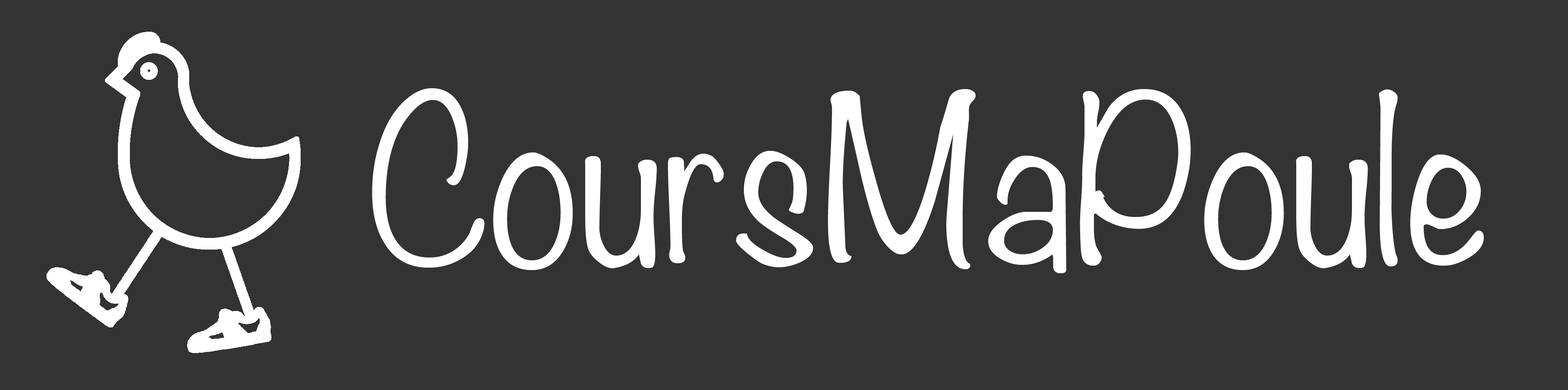
<style>
.page{position:relative;width:1568px;height:390px;background:#333333}
.page>*{position:absolute;margin:0}
.t1{font:200.4px "Noteworthy-Light";color:#ffffff}
</style>
<div class="page">
<p class="t1" style="left:372px;top:88px;width:1112px;height:185px">CoursMaPoule</p>
</div>
